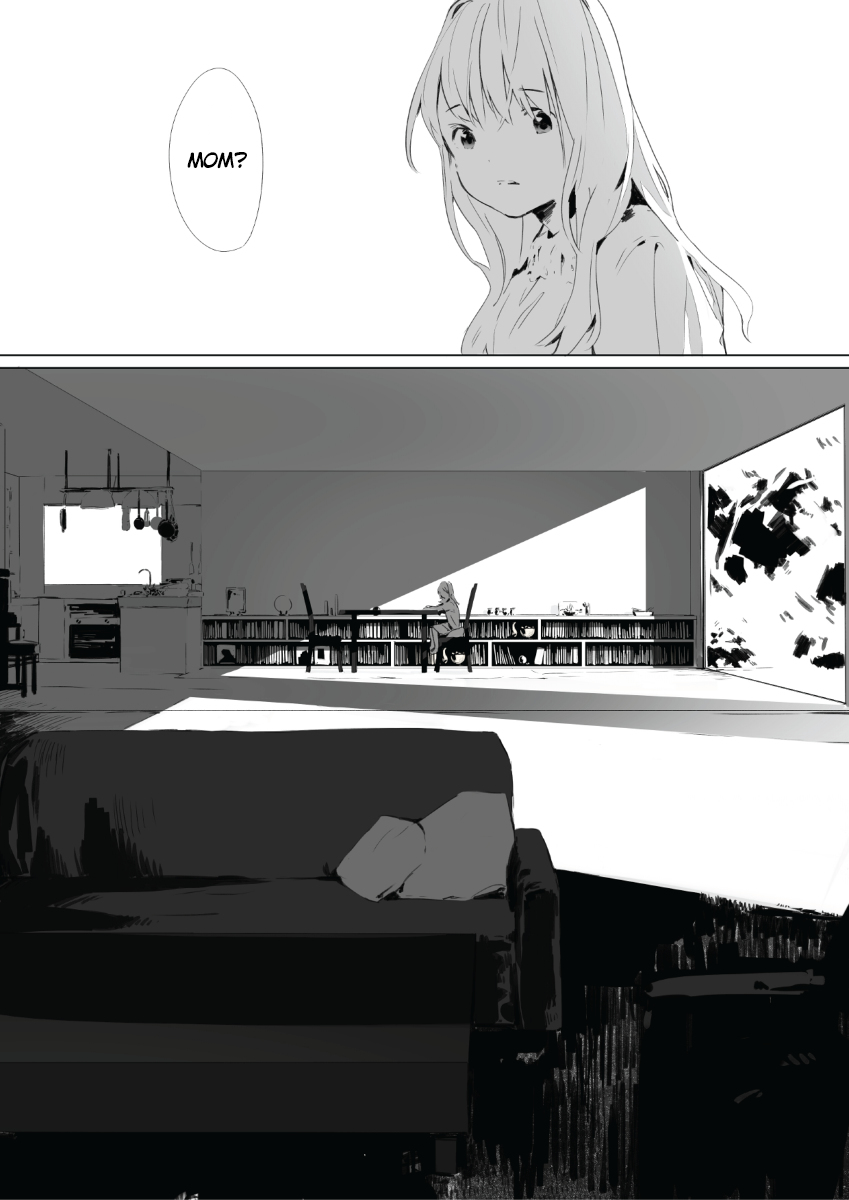
<style>
.page{position:relative;width:849px;height:1200px;background:#ffffff}
.page>*{position:absolute;margin:0}
.t1{font:20px "CCWildWordsRoman";color:#000000}
</style>
<div class="page">
<p class="t1" style="left:187px;top:151px;width:60px;height:18px">Mom?</p>
</div>
